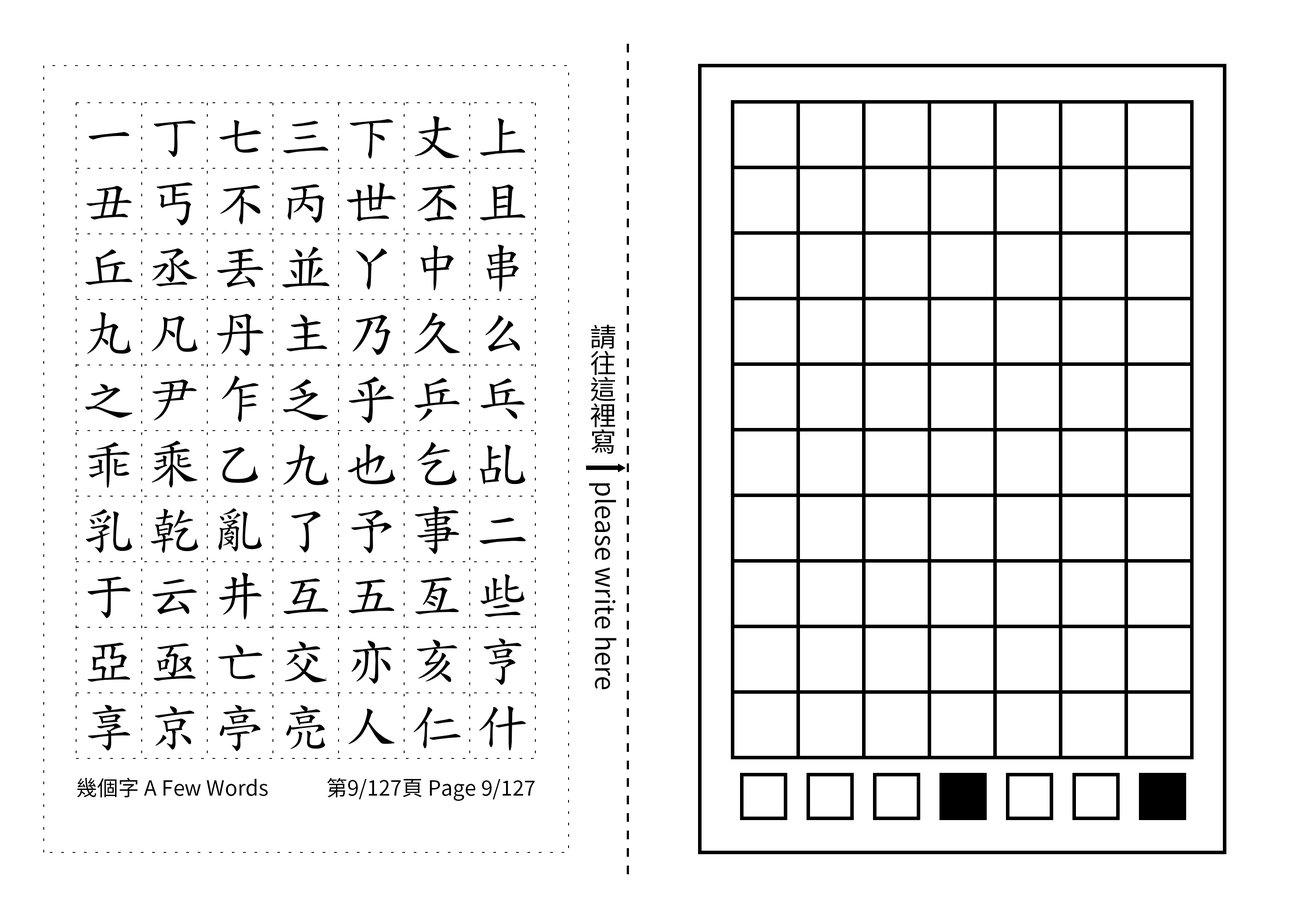
<style>
.page{position:relative;width:1299px;height:918px;background:#ffffff}
.page>*{position:absolute;margin:0}
.t1{font:52.5px/65.6px "TW-Kai-98_1";letter-spacing:0.25em;color:#000000}
.t2{font:26.2px "SourceHanSansTC-Regular";color:#000000}
.t3{font:21px "SourceHanSansTC-Regular";color:#000000}
</style>
<div class="page">
<p class="t1" style="left:85px;top:116px;width:441px;height:636px;text-align:center">一丁七三下丈上丑丐不丙世丕且丘丞丟並丫中串丸凡丹主乃久么之尹乍乏乎乒乓乖乘乙九也乞乩乳乾亂了予事二于云井互五亙些亞亟亡交亦亥亨享京亭亮人仁什</p>
<p class="t2" style="left:589px;top:324px;width:28px;height:366px;text-align:center">請往這裡寫　please write here</p>
<p class="t3" style="left:77px;top:778px;width:191px;height:20px">幾個字 A Few Words</p>
<p class="t3" style="left:327px;top:778px;width:208px;height:23px">第9/127頁 Page 9/127</p>
</div>
